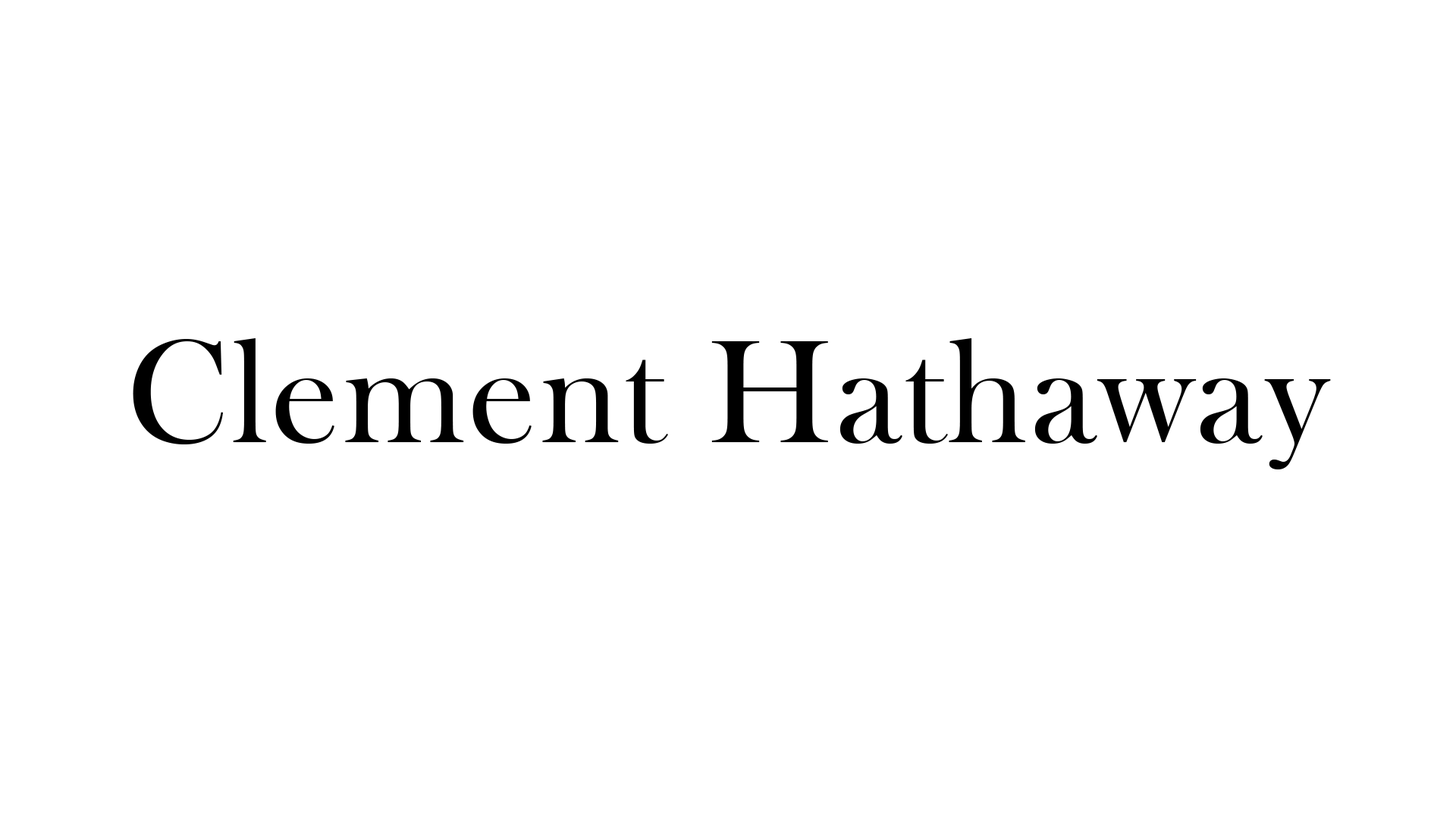
<style>
.page{position:relative;width:1456px;height:819px;background:#ffffff}
.page>*{position:absolute;margin:0}
.t1{font:151.7px "BaskOldFace";letter-spacing:0.025em;color:#000000}
</style>
<div class="page">
<p class="t1" style="left:133px;top:338px;width:1198px;height:131px">Clement Hathaway</p>
</div>
